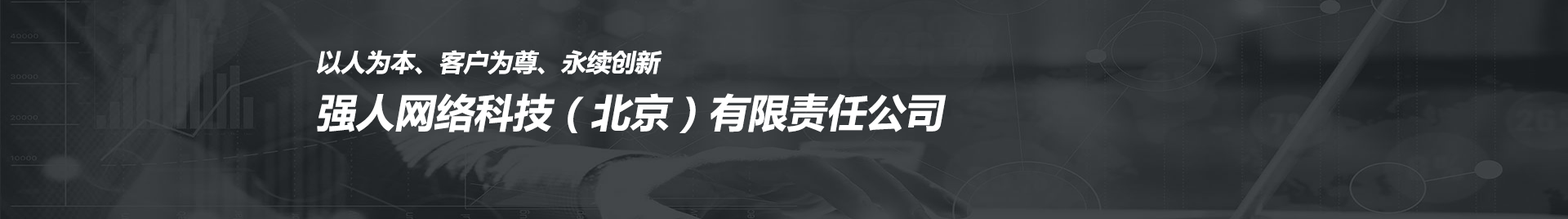
<style>
.page{position:relative;width:1568px;height:219px}
.page>*{position:absolute;margin:0}
.t1{font:39.2px "MicrosoftYaHei-Bold";color:#ffffff;font-style:italic}
.t2{font:24.5px "MicrosoftYaHei-Bold";color:#ffffff;font-style:italic}
</style>
<div class="page">
<p class="t1" style="left:317px;top:50px;width:630px;height:83px"><span class="t2">以人为本、客户为尊、永续创新<br></span>强人网络科技（北京）有限责任公司</p>
</div>
